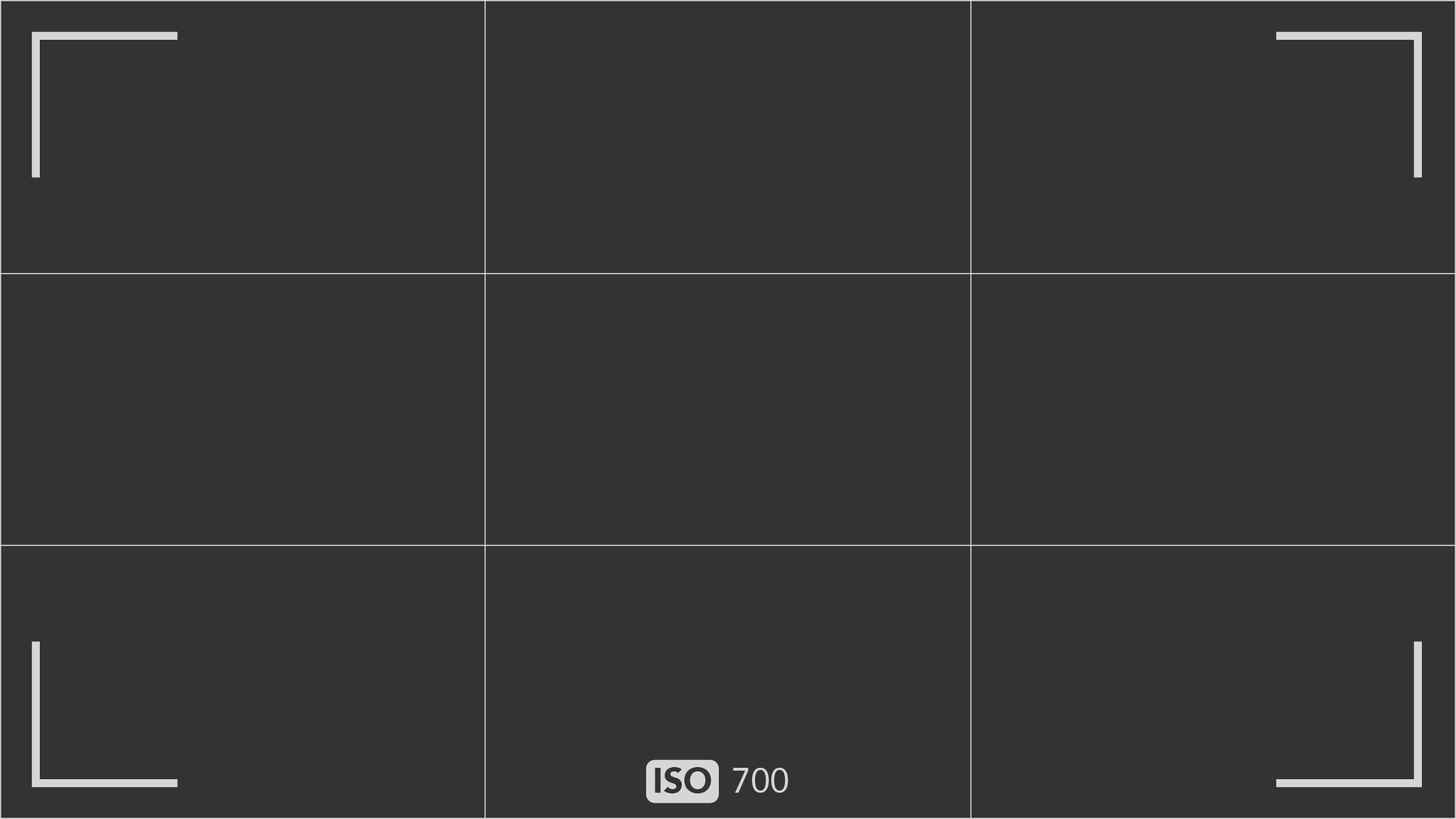
<style>
.page{position:relative;width:1456px;height:819px;background:#333333}
.page>*{position:absolute;margin:0}
.t1{font:34.7px "Avenir-Roman";color:#d6d6d6}
</style>
<div class="page">
<p class="t1" style="left:733px;top:768px;width:55px;height:25px">700</p>
</div>
